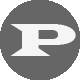
<style>
.page{position:relative;width:80px;height:80px;background:#666666}
.page>*{position:absolute;margin:0}
.t1{font:48px "LatinWide";color:#fefefe}
</style>
<div class="page">
<p class="t1" style="left:10px;top:24px;width:66px;height:32px;opacity:0.94">P</p>
</div>
